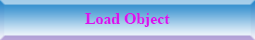
<style>
.page{position:relative;width:255px;height:40px}
.page>*{position:absolute;margin:0}
.t1{font:15.8px "TimesNewRomanPS-BoldMT";color:#d815ed}
</style>
<div class="page">
<p class="t1" style="left:85px;top:13px;width:85px;height:14px">Load Object</p>
</div>
